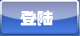
<style>
.page{position:relative;width:80px;height:36px}
.page>*{position:absolute;margin:0}
.t1{font:16.3px "STHupo";color:#ffffff;scale:1.04 1}
</style>
<div class="page">
<p class="t1" style="left:20px;top:10px;width:33px;height:16px">登陆</p>
</div>
